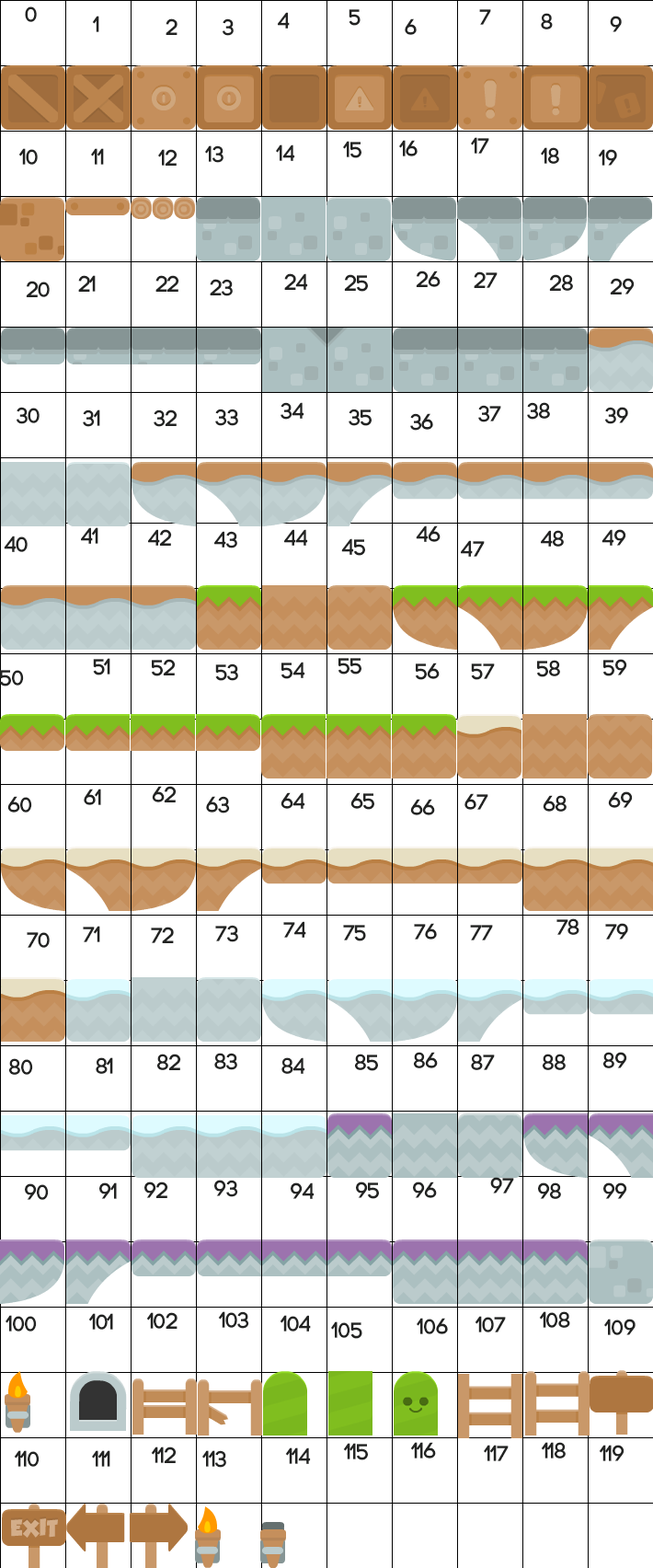
<style>
.page{position:relative;width:653px;height:1568px;background:#ffffff}
.page>*{position:absolute;margin:0}
.t1{font:22.1px "Code-Bold";color:#222322}
</style>
<div class="page">
<p class="t1" style="left:25px;top:6px;width:12px;height:16px">0</p>
<p class="t1" style="left:92px;top:16px;width:7px;height:16px">1</p>
<p class="t1" style="left:278px;top:12px;width:12px;height:17px">4</p>
<p class="t1" style="left:349px;top:9px;width:12px;height:17px">5</p>
<p class="t1" style="left:479px;top:9px;width:12px;height:16px">7</p>
<p class="t1" style="left:541px;top:13px;width:12px;height:16px">8</p>
<p class="t1" style="left:610px;top:16px;width:12px;height:16px">9</p>
<p class="t1" style="left:166px;top:18px;width:12px;height:17px">2</p>
<p class="t1" style="left:223px;top:18px;width:11px;height:18px">3</p>
<p class="t1" style="left:405px;top:18px;width:12px;height:17px">6</p>
<p class="t1" style="left:471px;top:137px;width:19px;height:17px">17</p>
<p class="t1" style="left:18px;top:148px;width:20px;height:17px">10</p>
<p class="t1" style="left:91px;top:148px;width:13px;height:17px">11</p>
<p class="t1" style="left:158px;top:149px;width:20px;height:17px">12</p>
<p class="t1" style="left:205px;top:145px;width:19px;height:18px">13</p>
<p class="t1" style="left:276px;top:144px;width:19px;height:17px">14</p>
<p class="t1" style="left:343px;top:141px;width:19px;height:17px">15</p>
<p class="t1" style="left:399px;top:140px;width:19px;height:16px">16</p>
<p class="t1" style="left:541px;top:147px;width:18px;height:17px">18</p>
<p class="t1" style="left:598px;top:149px;width:19px;height:17px">19</p>
<p class="t1" style="left:26px;top:281px;width:24px;height:16px">20</p>
<p class="t1" style="left:78px;top:275px;width:18px;height:17px">21</p>
<p class="t1" style="left:156px;top:275px;width:23px;height:17px">22</p>
<p class="t1" style="left:210px;top:279px;width:23px;height:17px">23</p>
<p class="t1" style="left:284px;top:273px;width:24px;height:17px">24</p>
<p class="t1" style="left:344px;top:274px;width:24px;height:18px">25</p>
<p class="t1" style="left:416px;top:271px;width:25px;height:16px">26</p>
<p class="t1" style="left:474px;top:271px;width:24px;height:17px">27</p>
<p class="t1" style="left:549px;top:274px;width:24px;height:17px">28</p>
<p class="t1" style="left:610px;top:278px;width:25px;height:16px">29</p>
<p class="t1" style="left:17px;top:407px;width:23px;height:17px">30</p>
<p class="t1" style="left:83px;top:409px;width:17px;height:18px">31</p>
<p class="t1" style="left:154px;top:409px;width:24px;height:18px">32</p>
<p class="t1" style="left:215px;top:409px;width:23px;height:17px">33</p>
<p class="t1" style="left:281px;top:402px;width:24px;height:18px">34</p>
<p class="t1" style="left:349px;top:409px;width:23px;height:17px">35</p>
<p class="t1" style="left:410px;top:413px;width:23px;height:18px">36</p>
<p class="t1" style="left:478px;top:405px;width:24px;height:17px">37</p>
<p class="t1" style="left:527px;top:402px;width:23px;height:18px">38</p>
<p class="t1" style="left:605px;top:407px;width:23px;height:17px">39</p>
<p class="t1" style="left:81px;top:527px;width:17px;height:17px">41</p>
<p class="t1" style="left:148px;top:529px;width:24px;height:17px">42</p>
<p class="t1" style="left:214px;top:531px;width:23px;height:17px">43</p>
<p class="t1" style="left:284px;top:529px;width:24px;height:17px">44</p>
<p class="t1" style="left:416px;top:525px;width:25px;height:17px">46</p>
<p class="t1" style="left:541px;top:530px;width:23px;height:17px">48</p>
<p class="t1" style="left:602px;top:529px;width:25px;height:17px">49</p>
<p class="t1" style="left:4px;top:536px;width:24px;height:16px">40</p>
<p class="t1" style="left:341px;top:538px;width:24px;height:18px">45</p>
<p class="t1" style="left:461px;top:540px;width:24px;height:17px">47</p>
<p class="t1" style="left:93px;top:658px;width:17px;height:17px">51</p>
<p class="t1" style="left:151px;top:659px;width:25px;height:17px">52</p>
<p class="t1" style="left:215px;top:663px;width:23px;height:18px">53</p>
<p class="t1" style="left:281px;top:662px;width:25px;height:17px">54</p>
<p class="t1" style="left:338px;top:658px;width:24px;height:16px">55</p>
<p class="t1" style="left:415px;top:663px;width:25px;height:17px">56</p>
<p class="t1" style="left:471px;top:663px;width:24px;height:17px">57</p>
<p class="t1" style="left:536px;top:660px;width:24px;height:17px">58</p>
<p class="t1" style="left:603px;top:659px;width:25px;height:17px">59</p>
<p class="t1" style="left:0px;top:670px;width:24px;height:16px">50</p>
<p class="t1" style="left:152px;top:786px;width:25px;height:16px">62</p>
<p class="t1" style="left:7px;top:796px;width:25px;height:17px">60</p>
<p class="t1" style="left:84px;top:789px;width:17px;height:16px">61</p>
<p class="t1" style="left:206px;top:796px;width:24px;height:17px">63</p>
<p class="t1" style="left:281px;top:792px;width:25px;height:17px">64</p>
<p class="t1" style="left:351px;top:792px;width:24px;height:18px">65</p>
<p class="t1" style="left:465px;top:793px;width:24px;height:17px">67</p>
<p class="t1" style="left:543px;top:795px;width:24px;height:17px">68</p>
<p class="t1" style="left:608px;top:791px;width:25px;height:17px">69</p>
<p class="t1" style="left:410px;top:799px;width:25px;height:16px">66</p>
<p class="t1" style="left:83px;top:926px;width:17px;height:16px">71</p>
<p class="t1" style="left:151px;top:927px;width:23px;height:16px">72</p>
<p class="t1" style="left:215px;top:925px;width:23px;height:17px">73</p>
<p class="t1" style="left:283px;top:921px;width:23px;height:17px">74</p>
<p class="t1" style="left:343px;top:925px;width:23px;height:16px">75</p>
<p class="t1" style="left:414px;top:923px;width:23px;height:17px">76</p>
<p class="t1" style="left:470px;top:925px;width:23px;height:15px">77</p>
<p class="t1" style="left:557px;top:918px;width:23px;height:17px">78</p>
<p class="t1" style="left:605px;top:923px;width:23px;height:17px">79</p>
<p class="t1" style="left:27px;top:932px;width:23px;height:16px">70</p>
<p class="t1" style="left:8px;top:1058px;width:25px;height:17px">80</p>
<p class="t1" style="left:96px;top:1057px;width:17px;height:17px">81</p>
<p class="t1" style="left:156px;top:1054px;width:25px;height:16px">82</p>
<p class="t1" style="left:214px;top:1053px;width:23px;height:17px">83</p>
<p class="t1" style="left:282px;top:1057px;width:24px;height:17px">84</p>
<p class="t1" style="left:354px;top:1054px;width:24px;height:17px">85</p>
<p class="t1" style="left:413px;top:1052px;width:25px;height:16px">86</p>
<p class="t1" style="left:471px;top:1054px;width:24px;height:16px">87</p>
<p class="t1" style="left:542px;top:1054px;width:24px;height:16px">88</p>
<p class="t1" style="left:603px;top:1052px;width:25px;height:16px">89</p>
<p class="t1" style="left:144px;top:1182px;width:24px;height:16px">92</p>
<p class="t1" style="left:214px;top:1180px;width:24px;height:17px">93</p>
<p class="t1" style="left:356px;top:1182px;width:23px;height:17px">95</p>
<p class="t1" style="left:413px;top:1182px;width:24px;height:16px">96</p>
<p class="t1" style="left:490px;top:1177px;width:24px;height:16px">97</p>
<p class="t1" style="left:25px;top:1183px;width:24px;height:17px">90</p>
<p class="t1" style="left:99px;top:1182px;width:18px;height:17px">91</p>
<p class="t1" style="left:291px;top:1182px;width:24px;height:17px">94</p>
<p class="t1" style="left:538px;top:1182px;width:23px;height:17px">98</p>
<p class="t1" style="left:604px;top:1182px;width:24px;height:17px">99</p>
<p class="t1" style="left:88px;top:1313px;width:25px;height:17px">101</p>
<p class="t1" style="left:146px;top:1312px;width:32px;height:17px">102</p>
<p class="t1" style="left:218px;top:1311px;width:31px;height:18px">103</p>
<p class="t1" style="left:539px;top:1311px;width:32px;height:17px">108</p>
<p class="t1" style="left:6px;top:1315px;width:31px;height:17px">100</p>
<p class="t1" style="left:280px;top:1315px;width:31px;height:17px">104</p>
<p class="t1" style="left:331px;top:1321px;width:32px;height:18px">105</p>
<p class="t1" style="left:417px;top:1318px;width:31px;height:16px">106</p>
<p class="t1" style="left:475px;top:1316px;width:31px;height:16px">107</p>
<p class="t1" style="left:605px;top:1319px;width:31px;height:16px">109</p>
<p class="t1" style="left:343px;top:1443px;width:25px;height:17px">115</p>
<p class="t1" style="left:410px;top:1442px;width:26px;height:16px">116</p>
<p class="t1" style="left:484px;top:1445px;width:25px;height:16px">117</p>
<p class="t1" style="left:541px;top:1442px;width:25px;height:16px">118</p>
<p class="t1" style="left:599px;top:1445px;width:26px;height:16px">119</p>
<p class="t1" style="left:14px;top:1450px;width:26px;height:17px">110</p>
<p class="t1" style="left:92px;top:1450px;width:18px;height:17px">111</p>
<p class="t1" style="left:151px;top:1447px;width:26px;height:16px">112</p>
<p class="t1" style="left:202px;top:1450px;width:24px;height:18px">113</p>
<p class="t1" style="left:285px;top:1447px;width:26px;height:17px">114</p>
</div>
